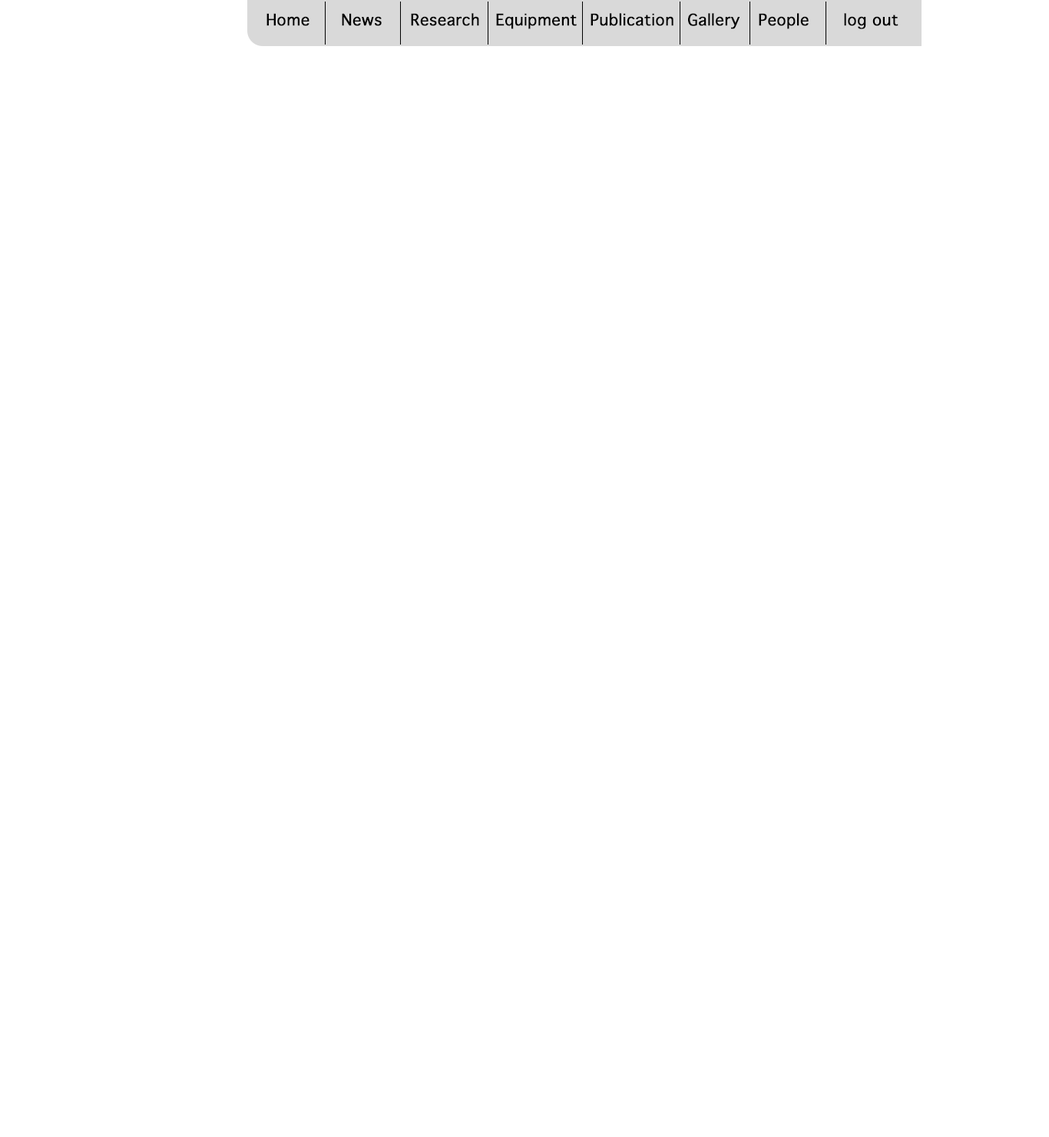
<style>
.page{position:relative;width:1049px;height:1137px;background:#ffffff}
.page>*{position:absolute;margin:0}
.t1{font:15.4px "Thonburi";color:#000000;font-weight:bold}
</style>
<div class="page">
<p class="t1" style="left:266px;top:13px;width:44px;height:13px">Home</p>
<p class="t1" style="left:342px;top:13px;width:40px;height:13px">News</p>
<p class="t1" style="left:411px;top:13px;width:68px;height:13px">Research</p>
<p class="t1" style="left:496px;top:13px;width:81px;height:16px">Equipment</p>
<p class="t1" style="left:591px;top:13px;width:83px;height:13px">Publication</p>
<p class="t1" style="left:688px;top:13px;width:52px;height:16px">Gallery</p>
<p class="t1" style="left:759px;top:13px;width:50px;height:16px">People</p>
<p class="t1" style="left:844px;top:13px;width:55px;height:16px">log out</p>
</div>
